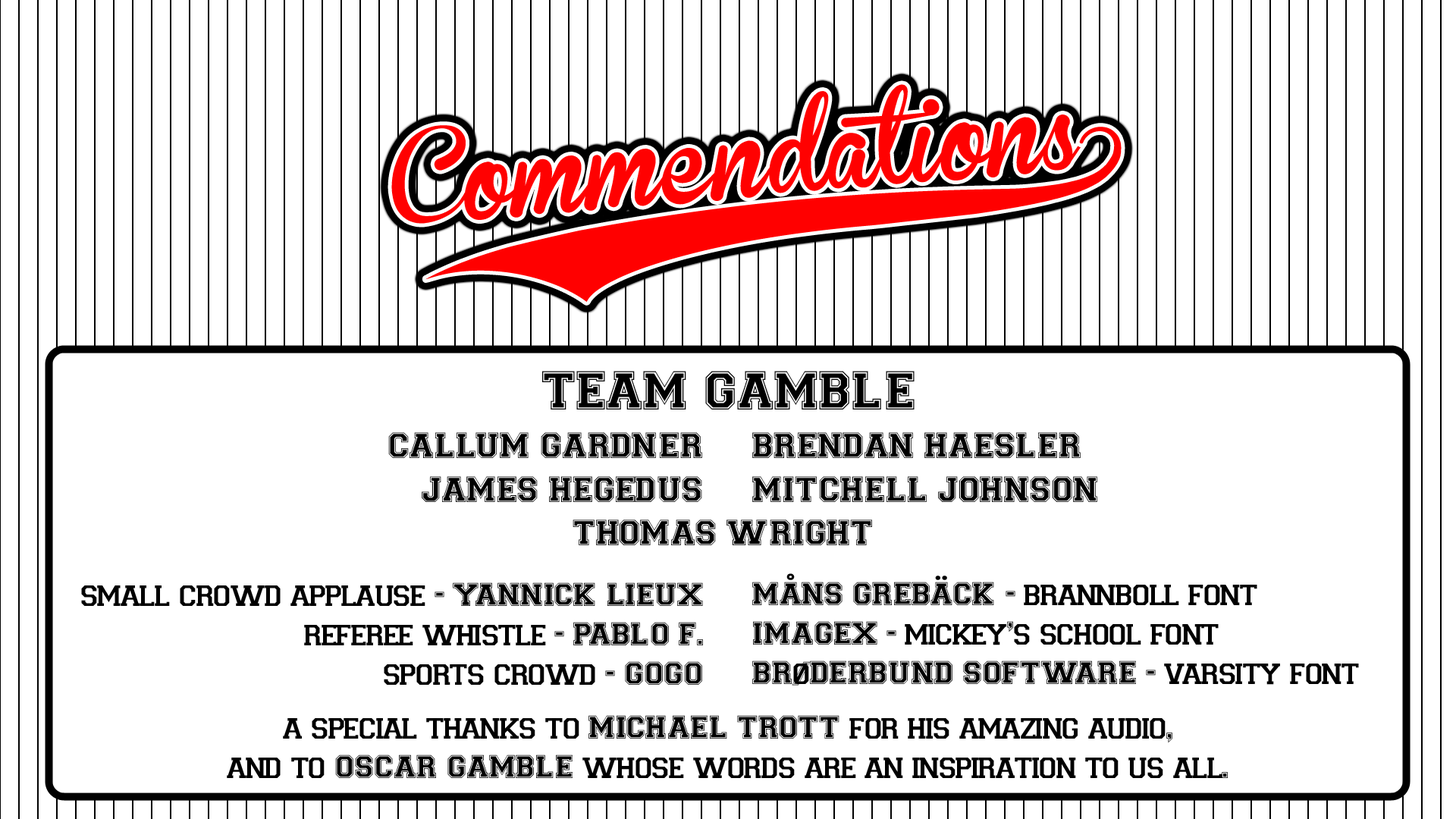
<style>
.page{position:relative;width:1456px;height:819px;background:#ffffff}
.page>*{position:absolute;margin:0}
.t1{font:54.6px "Varsity-Regular";color:#000000}
.t2{font:36.4px "Varsity-Regular";color:#000000}
.t3{font:32.8px "Varsity-Regular";color:#000000}
</style>
<div class="page">
<p class="t1" style="left:542px;top:371px;width:373px;height:38px">TEAM GAMBLE</p>
<p class="t2" style="left:388px;top:432px;width:314px;height:70px;text-align:right">CALLUM GARDNER<br>JAMES HEGEDUS</p>
<p class="t2" style="left:752px;top:432px;width:345px;height:70px">BRENDAN HAESLER<br>MITCHELL JOHNSON</p>
<p class="t2" style="left:573px;top:519px;width:299px;height:26px">THOMAS WRIGHT</p>
<p class="t3" style="left:752px;top:573px;width:607px;height:113px">MÅNS GREBÄCK - brannboll font<br>IMAGEX - mickey’s school font<br>BRØDERBUND SOFTWARE - varsity font</p>
<p class="t3" style="left:81px;top:582px;width:622px;height:103px;text-align:right">small crowd applause - YANNICK LIEUX<br>referee whistle - PABLO F.<br>sports crowd - GOGO</p>
<p class="t3" style="left:227px;top:715px;width:1001px;height:63px;text-align:center">a special thanks to MICHAEL TROTT for his amazing audio,<br>and to OSCAR GAMBLE whose words are an inspiration to us all.</p>
</div>
